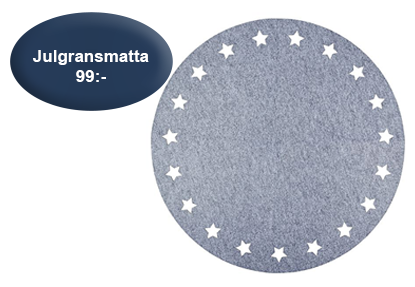
<style>
.page{position:relative;width:415px;height:287px;background:#ffffff}
.page>*{position:absolute;margin:0}
.t1{font:17px "Arial-BoldMT";color:#ffffff}
</style>
<div class="page">
<p class="t1" style="left:33px;top:50px;width:116px;height:32px;text-align:center">Julgransmatta<br>99:-</p>
</div>
